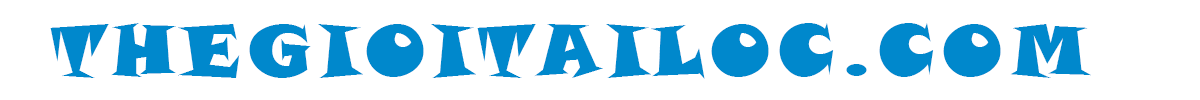
<style>
.page{position:relative;width:1200px;height:100px;background:#ffffff}
.page>*{position:absolute;margin:0}
.t1{font:72px "SnapITC-Regular";letter-spacing:0.1em;color:#0088cc}
</style>
<div class="page">
<p class="t1" style="left:50px;top:23px;width:1041px;height:56px">THEGIOITAILOC.COM</p>
</div>
